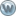
<style>
.page{position:relative;width:16px;height:16px}
.page>*{position:absolute;margin:0}
.t1{font:9px "SunnySide";color:#5c6974;font-variant:small-caps}
</style>
<div class="page">
<p class="t1" style="left:2px;top:4px;width:11px;height:9px;opacity:0.84">W</p>
</div>
